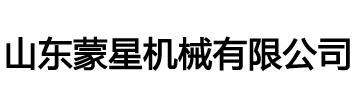
<style>
.page{position:relative;width:360px;height:91px;background:#ffffff}
.page>*{position:absolute;margin:0}
.t1{font:34px "MicrosoftYaHei";color:#000000;font-weight:bold}
</style>
<div class="page">
<p class="t1" style="left:6px;top:36px;width:344px;height:35px">山东蒙星机械有限公司</p>
</div>
